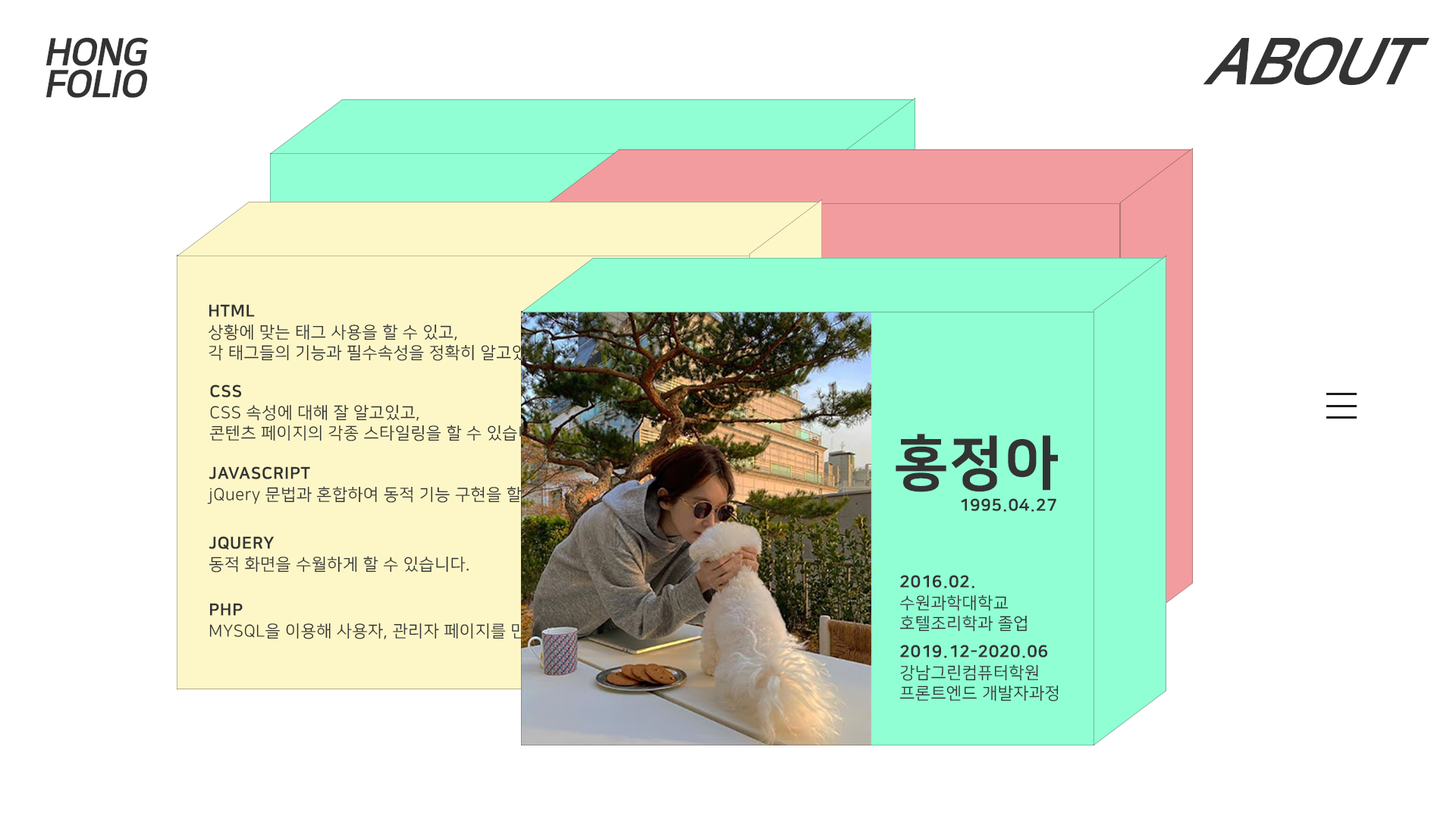
<style>
.page{position:relative;width:1456px;height:819px;background:#ffffff}
.page>*{position:absolute;margin:0}
.t1{font:37.9px/31.9px "NanumSquareEB";letter-spacing:-0.035em;color:#333333;font-style:italic}
.t2{font:70.8px "NanumSquareEB";letter-spacing:-0.035em;color:#333333;scale:0.91 1}
.t3{font:16.6px/20.7px "NanumSquareR";letter-spacing:0.025em;color:#333333}
.t4{font:16.6px/20.7px "NanumSquareEB";letter-spacing:0.025em;color:#333333}
.t5{font:58.7px "NanumSquareEB";letter-spacing:0.025em;color:#333333}
.t6{font:16.6px "NanumSquareEB";letter-spacing:0.025em;color:#333333}
</style>
<div class="page">
<p class="t1" style="left:45px;top:37px;width:104px;height:61px">HONG<br>FOLIO</p>
<p class="t2" style="left:1203px;top:37px;width:226px;height:49px">ABOUT</p>
<p class="t3" style="left:209px;top:304px;width:368px;height:57px"><span class="t4">HTML<br></span>상황에 맞는 태그 사용을 할 수 있고, <br>각 태그들의 기능과 필수속성을 정확히 알고있습니다.</p>
<p class="t3" style="left:209px;top:384px;width:343px;height:57px"><span class="t4">CSS<br></span>CSS 속성에 대해 잘 알고있고,<br>콘텐츠 페이지의 각종 스타일링을 할 수 있습니다.</p>
<p class="t5" style="left:896px;top:434px;width:162px;height:58px">홍정아</p>
<p class="t3" style="left:207px;top:466px;width:406px;height:38px"><span class="t4">JAVASCRIPT<br></span>jQuery 문법과 혼합하여 동적 기능 구현을 할 수 있습니다.</p>
<p class="t6" style="left:961px;top:498px;width:95px;height:14px">1995.04.27</p>
<p class="t3" style="left:209px;top:536px;width:260px;height:37px"><span class="t4">JQUERY<br></span>동적 화면을 수월하게 할 수 있습니다.</p>
<p class="t3" style="left:899px;top:575px;width:128px;height:57px"><span class="t4">2016.02.<br></span>수원과학대학교<br>호텔조리학과 졸업</p>
<p class="t3" style="left:209px;top:603px;width:414px;height:36px"><span class="t4">PHP<br></span>MYSQL을 이용해 사용자, 관리자 페이지를 만들수있습니다.</p>
<p class="t3" style="left:899px;top:645px;width:160px;height:56px"><span class="t4">2019.12-2020.06<br></span>강남그린컴퓨터학원<br>프론트엔드 개발자과정</p>
</div>
